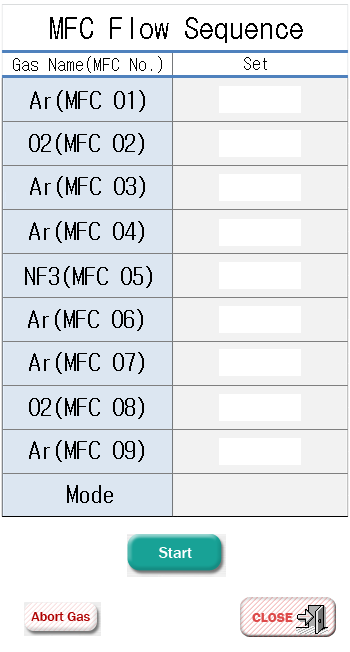
<style>
.page{position:relative;width:350px;height:652px;background:#ffffff}
.page>*{position:absolute;margin:0}
.t1{font:30px "GulimChe";color:#000000}
.t2{font:18px "GulimChe";color:#000000}
.t3{font:24px "GulimChe";color:#000000}
</style>
<div class="page">
<p class="t1" style="left:50px;top:17px;width:253px;height:26px">MFC Flow Sequence</p>
<p class="t2" style="left:13px;top:56px;width:149px;height:17px">Gas Name(MFC No.)</p>
<p class="t2" style="left:244px;top:57px;width:23px;height:13px">Set</p>
<p class="t3" style="left:30px;top:90px;width:115px;height:22px">Ar(MFC 01)</p>
<p class="t3" style="left:29px;top:133px;width:115px;height:22px">O2(MFC 02)</p>
<p class="t3" style="left:30px;top:176px;width:115px;height:22px">Ar(MFC 03)</p>
<p class="t3" style="left:29px;top:221px;width:115px;height:22px">Ar(MFC 04)</p>
<p class="t3" style="left:25px;top:266px;width:127px;height:22px">NF3(MFC 05)</p>
<p class="t3" style="left:28px;top:309px;width:115px;height:22px">Ar(MFC 06)</p>
<p class="t3" style="left:29px;top:352px;width:115px;height:22px">Ar(MFC 07)</p>
<p class="t3" style="left:29px;top:397px;width:115px;height:22px">O2(MFC 08)</p>
<p class="t3" style="left:29px;top:440px;width:115px;height:22px">Ar(MFC 09)</p>
<p class="t3" style="left:67px;top:485px;width:46px;height:18px">Mode</p>
</div>
